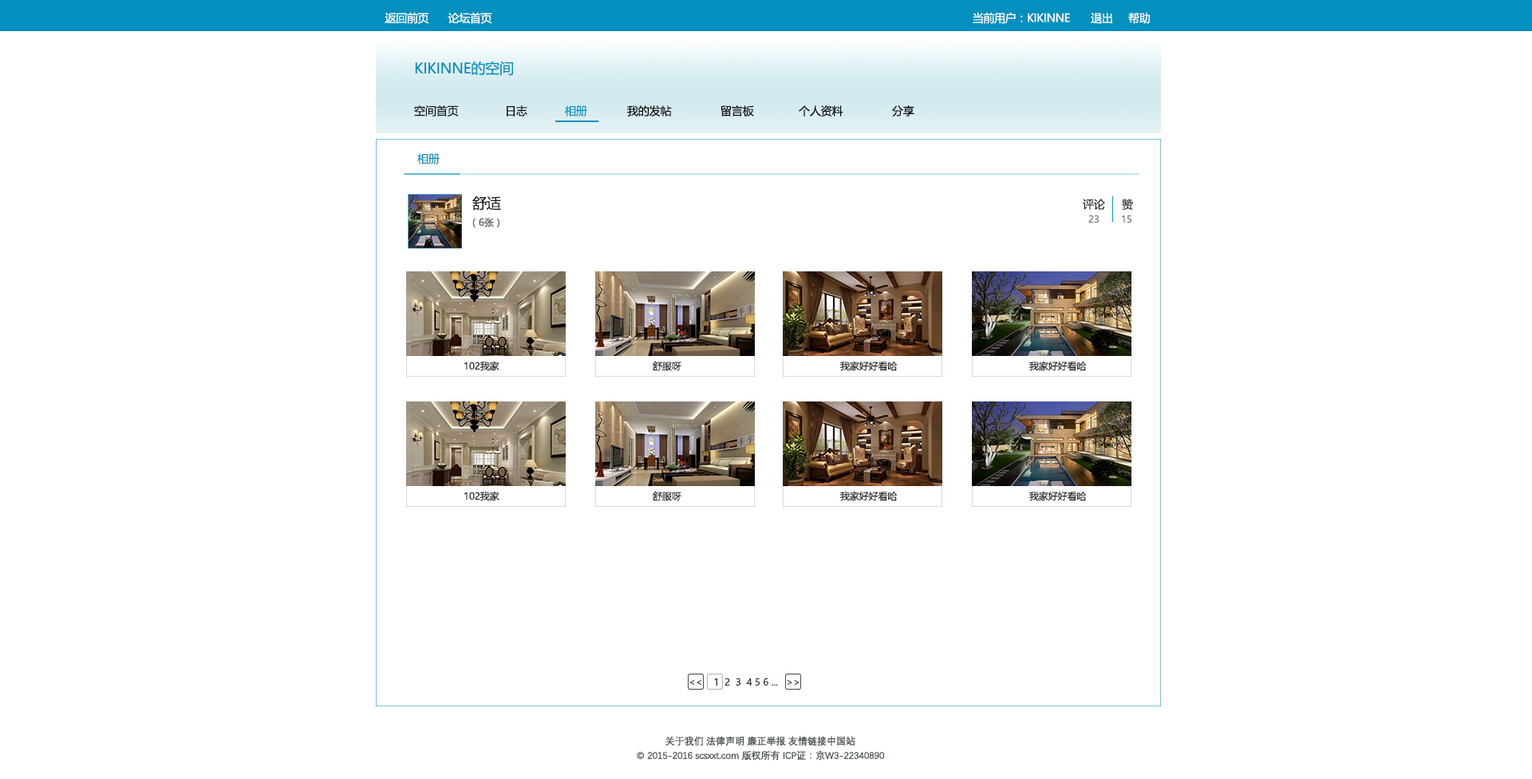
<style>
.page{position:relative;width:1532px;height:779px;background:#ffffff}
.page>*{position:absolute;margin:0}
.t1{font:11.2px "MicrosoftYaHei";letter-spacing:-0.025em;color:#ffffff}
.t2{font:14.4px "MicrosoftYaHei";letter-spacing:-0.01em;color:#0390bf}
.t3{font:11.2px "MicrosoftYaHei";letter-spacing:-0.01em;color:#191a1a}
.t4{font:11.2px "MicrosoftYaHei";letter-spacing:-0.01em;color:#040404}
.t5{font:11.2px "MicrosoftYaHei";letter-spacing:-0.01em;color:#0390bf}
.t6{font:14.4px "MicrosoftYaHei";letter-spacing:-0.01em;color:#242323}
.t7{font:11.2px "MicrosoftYaHei";letter-spacing:-0.01em;color:#242323}
.t8{font:9.6px "MicrosoftYaHei";letter-spacing:-0.01em;color:#585858}
.t9{font:9.6px "MicrosoftYaHei";letter-spacing:-0.01em;color:#7b7b7b}
.t10{font:9.6px "MicrosoftYaHei";letter-spacing:-0.01em;color:#242323}
.t11{font:9.6px "MicrosoftYaHei";letter-spacing:-0.01em;color:#38393a}
.t12{font:9.6px "MicrosoftYaHei";letter-spacing:-0.01em;color:#252626}
.t13{font:9.6px/14.4px "DengXian-Regular";letter-spacing:-0.025em;color:#545a5c;font-weight:bold}
</style>
<div class="page">
<p class="t1" style="left:384px;top:12px;width:45px;height:12px">返回前页</p>
<p class="t1" style="left:448px;top:12px;width:44px;height:12px">论坛首页</p>
<p class="t1" style="left:972px;top:12px;width:98px;height:12px">当前用户：KIKINNE</p>
<p class="t1" style="left:1090px;top:13px;width:22px;height:11px">退出</p>
<p class="t1" style="left:1128px;top:12px;width:21px;height:12px">帮助</p>
<p class="t2" style="left:415px;top:61px;width:98px;height:15px">KIKINNE的空间</p>
<p class="t3" style="left:414px;top:105px;width:45px;height:11px">空间首页</p>
<p class="t4" style="left:507px;top:105px;width:20px;height:11px">日志</p>
<p class="t5" style="left:565px;top:105px;width:22px;height:11px">相册</p>
<p class="t4" style="left:627px;top:105px;width:45px;height:11px">我的发帖</p>
<p class="t4" style="left:720px;top:105px;width:34px;height:11px">留言板</p>
<p class="t4" style="left:799px;top:105px;width:44px;height:11px">个人资料</p>
<p class="t4" style="left:892px;top:105px;width:22px;height:11px">分享</p>
<p class="t5" style="left:417px;top:153px;width:23px;height:11px">相册</p>
<p class="t6" style="left:472px;top:196px;width:29px;height:15px">舒适</p>
<p class="t7" style="left:1082px;top:199px;width:23px;height:11px">评论</p>
<p class="t7" style="left:1122px;top:199px;width:11px;height:11px">赞</p>
<p class="t8" style="left:472px;top:217px;width:27px;height:10px">（6张）</p>
<p class="t9" style="left:1088px;top:215px;width:11px;height:8px">23</p>
<p class="t9" style="left:1122px;top:215px;width:10px;height:8px">15</p>
<p class="t10" style="left:464px;top:361px;width:35px;height:10px">102我家</p>
<p class="t10" style="left:653px;top:361px;width:28px;height:10px">舒服呀</p>
<p class="t10" style="left:840px;top:361px;width:57px;height:10px">我家好好看哈</p>
<p class="t10" style="left:1029px;top:361px;width:57px;height:10px">我家好好看哈</p>
<p class="t10" style="left:464px;top:491px;width:35px;height:10px">102我家</p>
<p class="t10" style="left:653px;top:491px;width:28px;height:10px">舒服呀</p>
<p class="t10" style="left:840px;top:491px;width:57px;height:10px">我家好好看哈</p>
<p class="t10" style="left:1029px;top:491px;width:57px;height:10px">我家好好看哈</p>
<p class="t11" style="left:689px;top:677px;width:110px;height:9px">&lt;&lt;    1  2 <span class="t12"> 3</span>  4 5 6 ...   &gt;&gt;</p>
<p class="t13" style="left:637px;top:735px;width:247px;height:25px;text-align:center">关于我们 法律声明 廉正举报 友情链接中国站<br>© 2015-2016 scsxxt.com 版权所有 ICP证：京W3-22340890</p>
</div>
